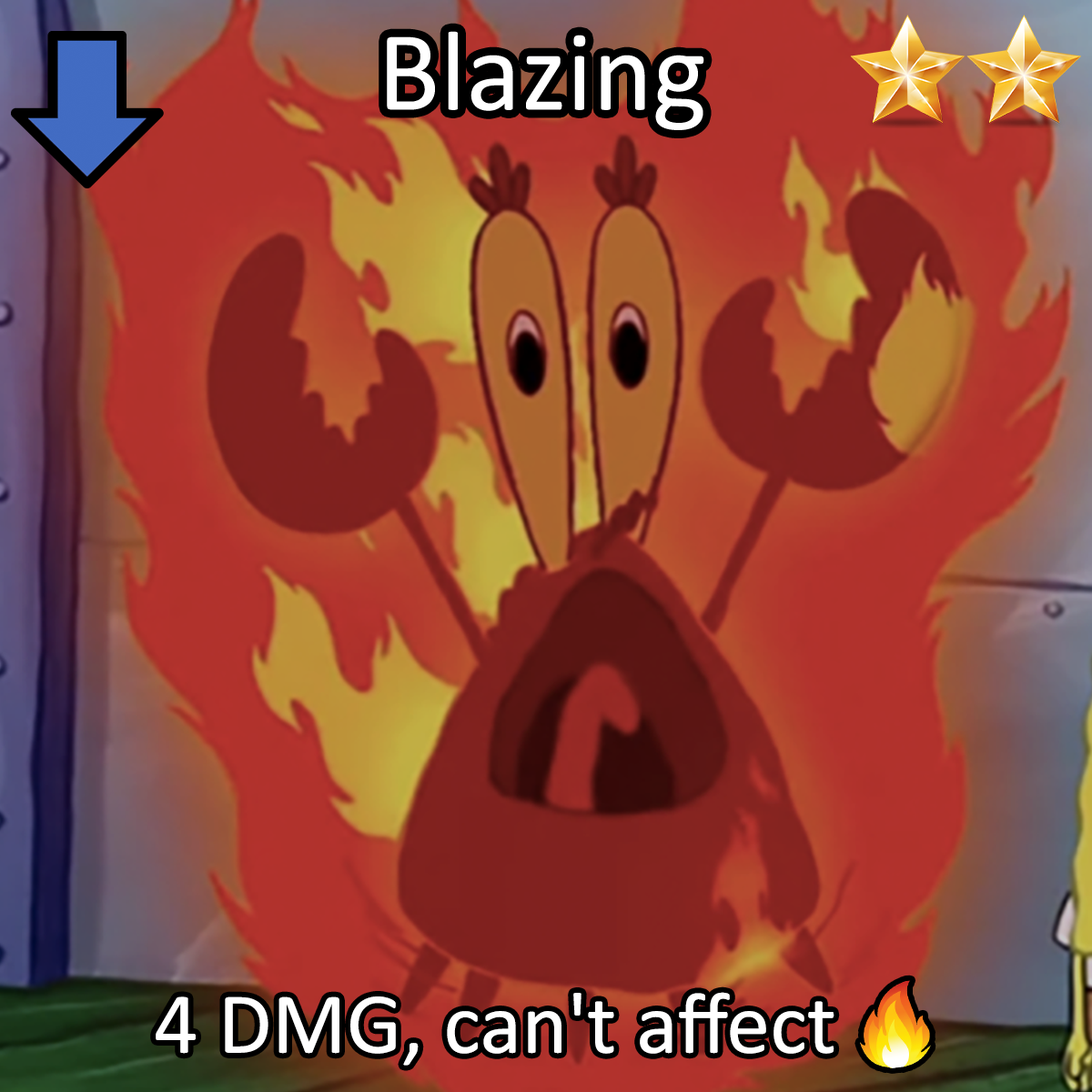
<style>
.page{position:relative;width:1092px;height:1092px}
.page>*{position:absolute;margin:0}
.t1{font:196.6px "Calibri";color:#ffffff}
.t2{font:150.1px "Calibri";color:#ffffff}
.t3{font:150.1px "stoogedings-Regular";color:#ffffff}
</style>
<div class="page">
<p class="t1" style="left:387px;top:31px;width:317px;height:99px">Blazing</p>
<p class="t2" style="left:156px;top:980px;width:775px;height:88px">4 DMG, can't affect <span class="t3">[fire]</span></p>
</div>
